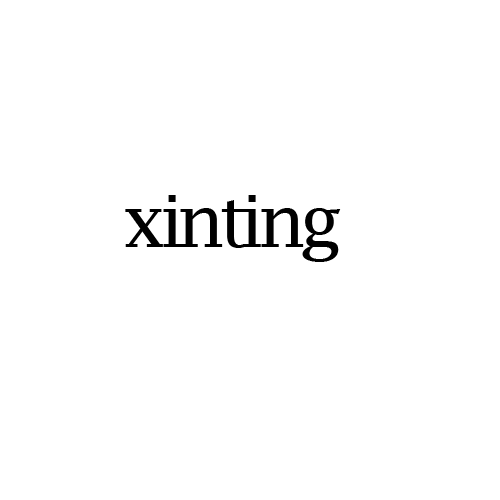
<style>
.page{position:relative;width:500px;height:500px;background:#ffffff}
.page>*{position:absolute;margin:0}
.t1{font:72px "LucidaFax";color:#000000}
</style>
<div class="page">
<p class="t1" style="left:125px;top:195px;width:216px;height:67px">xinting</p>
</div>
